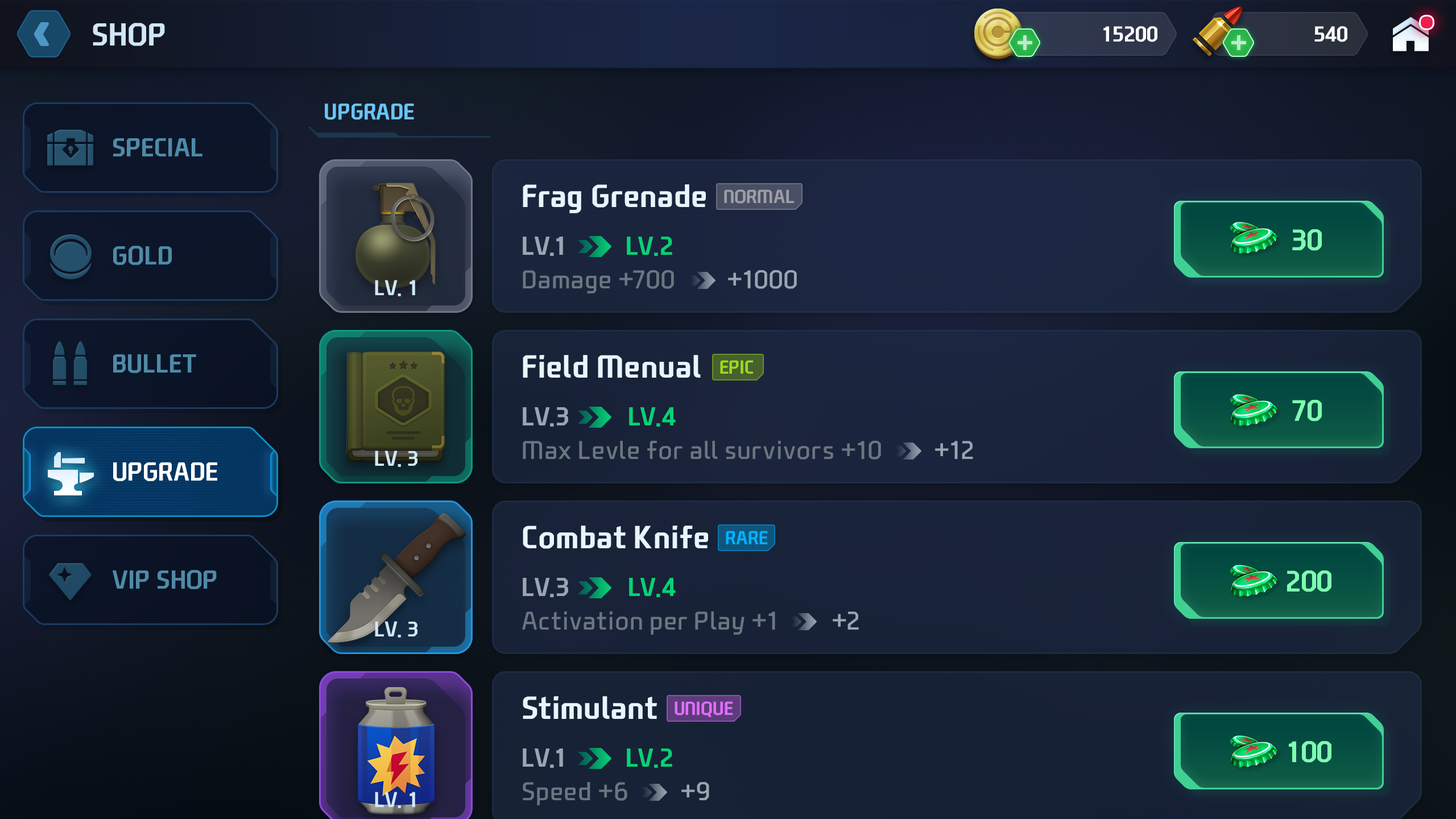
<style>
.page{position:relative;width:1456px;height:819px}
.page>*{position:absolute;margin:0}
.t1{font:30.6px "NEXONFootballGothicB";color:#cfe7f7;text-transform:uppercase}
.t2{font:20.7px "NEXONFootballGothicB";color:#ffffff;text-transform:uppercase}
.t3{font:21.6px "NEXONFootballGothicB";color:#68c5f7;text-transform:uppercase}
.t4{font:25px "NEXONFootballGothicB";color:#4e8aa6;text-transform:uppercase}
.t5{font:30.7px "NEXONFootballGothicB";color:#e6f6ff}
.t6{font:18.2px "NEXONFootballGothicB";color:#9e9ea8;text-transform:uppercase}
.t7{font:28.4px "NEXONFootballGothicB";color:#7effb1}
.t8{font:25px "NEXONFootballGothicB";color:#97a6b3}
.t9{font:25px "NEXONFootballGothicB";color:#05d275}
.t10{font:20.5px "NEXONFootballGothicB";color:#cfe7f7;text-transform:uppercase}
.t11{font:25px "NEXONFootballGothicL";color:#6a7681}
.t12{font:25px "NEXONFootballGothicL";color:#97a6b3}
.t13{font:18.2px "NEXONFootballGothicB";color:#a1d622;text-transform:uppercase}
.t14{font:25px "NEXONFootballGothicB";color:#ffffff;text-transform:uppercase}
.t15{font:18.2px "NEXONFootballGothicB";color:#00b2ff;text-transform:uppercase}
.t16{font:18.2px "NEXONFootballGothicB";color:#e16efd;text-transform:uppercase}
</style>
<div class="page">
<p class="t1" style="left:93px;top:23px;width:72px;height:23px">shop</p>
<p class="t2" style="left:1103px;top:26px;width:54px;height:16px">15200</p>
<p class="t2" style="left:1314px;top:26px;width:33px;height:16px">540</p>
<p class="t3" style="left:325px;top:104px;width:89px;height:16px">Upgrade</p>
<p class="t4" style="left:113px;top:138px;width:89px;height:18px">Special</p>
<p class="t5" style="left:523px;top:184px;width:183px;height:29px">Frag Grenade</p>
<p class="t6" style="left:724px;top:189px;width:71px;height:15px">NORMAL</p>
<p class="t7" style="left:1292px;top:229px;width:30px;height:22px">30</p>
<p class="t4" style="left:113px;top:246px;width:59px;height:19px">Gold</p>
<p class="t8" style="left:523px;top:237px;width:149px;height:19px">LV.1         <span class="t9">LV.2</span></p>
<p class="t10" style="left:375px;top:280px;width:40px;height:16px">lv. 1</p>
<p class="t11" style="left:523px;top:270px;width:274px;height:23px">Damage +700        <span class="t12">+1000</span></p>
<p class="t4" style="left:113px;top:354px;width:83px;height:19px">Bullet</p>
<p class="t5" style="left:523px;top:355px;width:178px;height:23px">Field Menual</p>
<p class="t13" style="left:720px;top:360px;width:33px;height:14px">epic</p>
<p class="t7" style="left:1292px;top:400px;width:30px;height:21px">70</p>
<p class="t8" style="left:523px;top:407px;width:153px;height:20px">LV.3         <span class="t9">LV.4</span></p>
<p class="t11" style="left:523px;top:441px;width:450px;height:19px">Max Levle for all survivors +10        <span class="t12">+12</span></p>
<p class="t10" style="left:375px;top:450px;width:42px;height:17px">lv. 3</p>
<p class="t14" style="left:113px;top:462px;width:104px;height:19px">Upgrade</p>
<p class="t14" style="left:113px;top:462px;width:104px;height:19px">Upgrade</p>
<p class="t5" style="left:523px;top:526px;width:185px;height:23px">Combat Knife</p>
<p class="t15" style="left:726px;top:531px;width:42px;height:13px">Rare</p>
<p class="t4" style="left:113px;top:570px;width:104px;height:19px">VIP Shop</p>
<p class="t8" style="left:523px;top:578px;width:153px;height:19px">LV.3         <span class="t9">LV.4</span></p>
<p class="t7" style="left:1287px;top:570px;width:44px;height:22px">200</p>
<p class="t11" style="left:522px;top:611px;width:337px;height:24px">Activation per Play +1        <span class="t12">+2</span></p>
<p class="t10" style="left:375px;top:621px;width:42px;height:17px">lv. 3</p>
<p class="t5" style="left:523px;top:696px;width:134px;height:23px">Stimulant</p>
<p class="t16" style="left:675px;top:701px;width:58px;height:16px">Unique</p>
<p class="t8" style="left:523px;top:748px;width:149px;height:20px">LV.1         <span class="t9">LV.2</span></p>
<p class="t7" style="left:1289px;top:741px;width:42px;height:22px">100</p>
<p class="t11" style="left:523px;top:782px;width:186px;height:23px">Speed +6        <span class="t12">+9</span></p>
<p class="t10" style="left:375px;top:792px;width:40px;height:16px">lv. 1</p>
</div>
